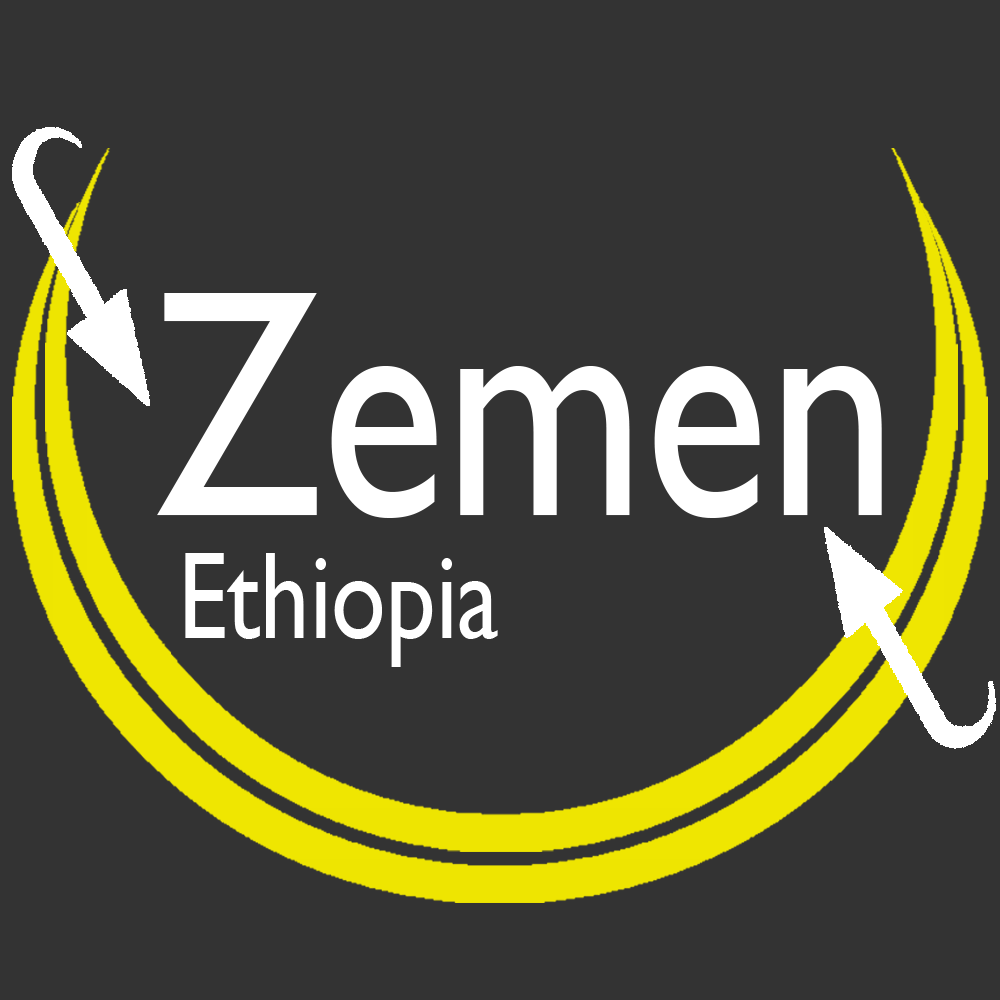
<style>
.page{position:relative;width:1000px;height:1000px;background:#333333}
.page>*{position:absolute;margin:0}
.t1{font:326.3px "GillSansMT";color:#ffffff;scale:0.79 1}
.t2{font:125px "GillSansMT";color:#ffffff;scale:0.79 1}
</style>
<div class="page">
<p class="t1" style="left:157px;top:293px;width:725px;height:225px">Zemen</p>
<p class="t2" style="left:185px;top:553px;width:313px;height:114px">Ethiopia</p>
</div>
